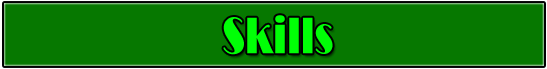
<style>
.page{position:relative;width:547px;height:69px;background:#067800}
.page>*{position:absolute;margin:0}
.t1{font:53.3px "Broadway";color:#00ff06;scale:0.72 1}
</style>
<div class="page">
<p class="t1" style="left:223px;top:15px;width:110px;height:40px">Skills</p>
</div>
